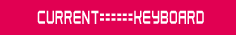
<style>
.page{position:relative;width:236px;height:35px;background:#e10052}
.page>*{position:absolute;margin:0}
.t1{font:21.6px "Ast126";color:#ffffff;scale:0.42 1}
</style>
<div class="page">
<p class="t1" style="left:37px;top:10px;width:167px;height:14px">current======keyboard</p>
</div>
